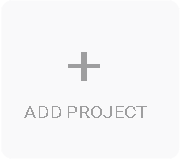
<style>
.page{position:relative;width:180px;height:159px;background:#f9f9fa}
.page>*{position:absolute;margin:0}
.t1{font:57.7px "Roboto-Regular";color:#9e9e9f;scale:1.16 1}
.t2{font:16.1px "Roboto-Regular";color:#9e9e9f;scale:1.16 1}
</style>
<div class="page">
<p class="t1" style="left:68px;top:52px;width:32px;height:29px">+</p>
<p class="t2" style="left:24px;top:106px;width:123px;height:12px">ADD PROJECT</p>
</div>
